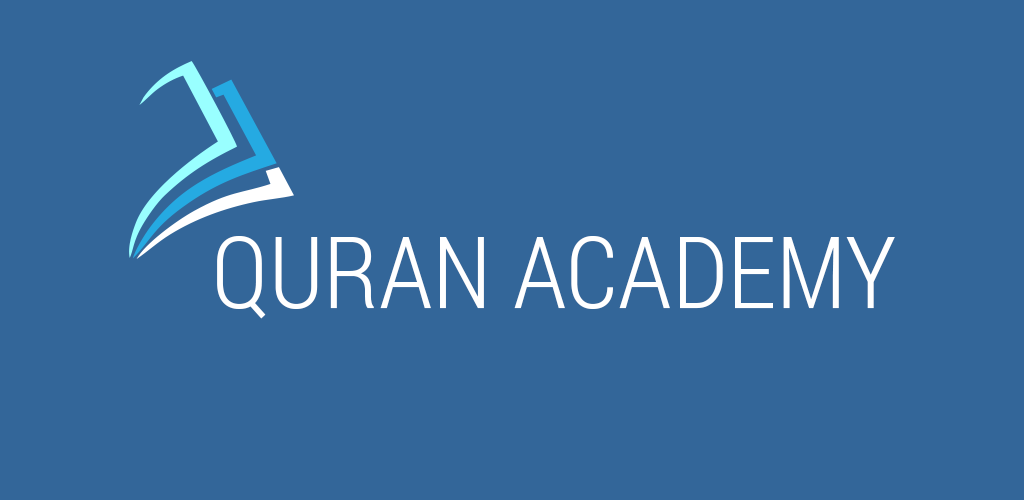
<style>
.page{position:relative;width:1024px;height:500px;background:#336699}
.page>*{position:absolute;margin:0}
.t1{font:99.9px "RobotoCondensed-Light";color:#ffffff}
</style>
<div class="page">
<p class="t1" style="left:217px;top:236px;width:678px;height:83px">QURAN ACADEMY</p>
</div>
